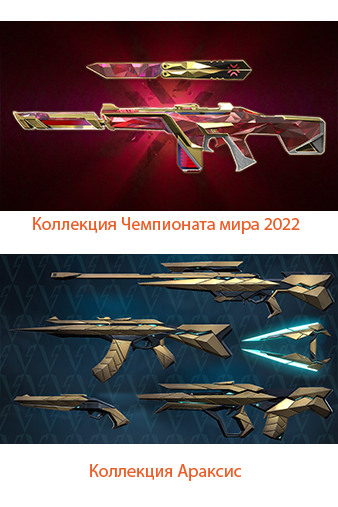
<style>
.page{position:relative;width:338px;height:507px;background:#ffffff}
.page>*{position:absolute;margin:0}
.t1{font:18px "MyriadPro-Regular";color:#eb5e28}
</style>
<div class="page">
<p class="t1" style="left:33px;top:217px;width:267px;height:17px">Коллекция Чемпионата мира 2022</p>
<p class="t1" style="left:90px;top:464px;width:152px;height:17px">Коллекция Араксис</p>
</div>
